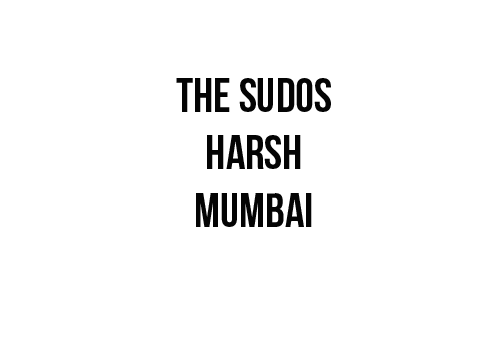
<style>
.page{position:relative;width:504px;height:360px;background:#ffffff}
.page>*{position:absolute;margin:0}
.t1{font:48px "BebasNeueBold";color:#040404}
</style>
<div class="page">
<p class="t1" style="left:176px;top:78px;width:155px;height:149px;text-align:center">The sudos<br>harsh<br>mumbai</p>
</div>
